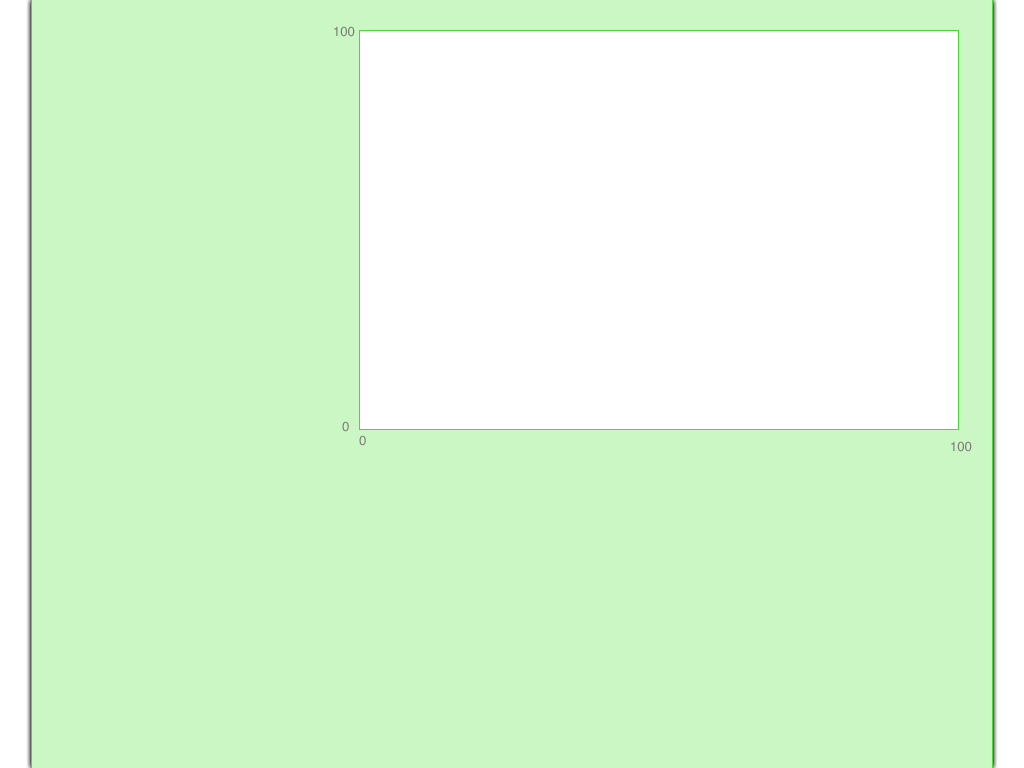
<style>
.page{position:relative;width:1024px;height:768px;background:#cbf7c4}
.page>*{position:absolute;margin:0}
.t1{font:13px "Helvetica";color:#7d7d77}
</style>
<div class="page">
<p class="t1" style="left:334px;top:26px;width:21px;height:11px">100</p>
<p class="t1" style="left:342px;top:421px;width:7px;height:11px">0</p>
<p class="t1" style="left:359px;top:435px;width:7px;height:11px">0</p>
<p class="t1" style="left:951px;top:441px;width:21px;height:11px">100</p>
</div>
